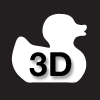
<style>
.page{position:relative;width:100px;height:100px;background:#231f20}
.page>*{position:absolute;margin:0}
.t1{font:33.3px "AlteHaasGrotesk_Bold";color:#000000}
</style>
<div class="page">
<p class="t1" style="left:29px;top:52px;width:43px;height:25px">3D</p>
</div>
